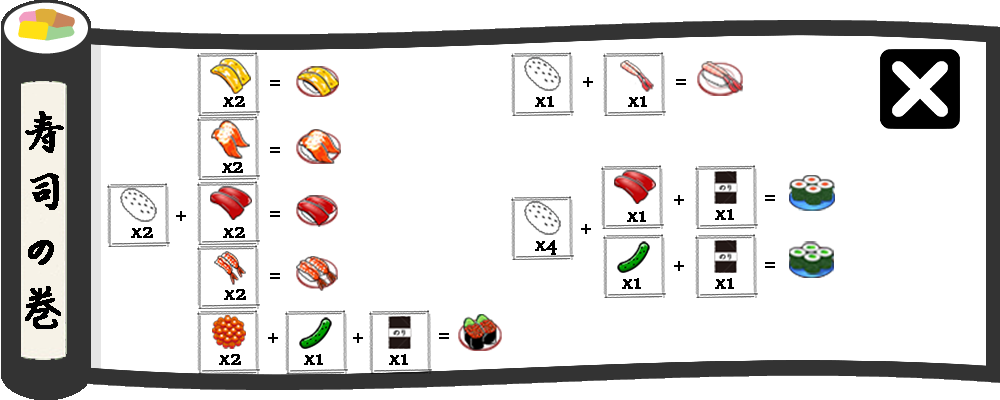
<style>
.page{position:relative;width:1000px;height:400px;background:#ffffff}
.page>*{position:absolute;margin:0}
.t1{font:21.8px "SitkaBanner";color:#000000;font-weight:bold}
.t2{font:48.6px/29.2px "HanziPenSC-W5";color:#000000;font-weight:bold}
</style>
<div class="page">
<p class="t1" style="left:583px;top:77px;width:10px;height:10px">+</p>
<p class="t1" style="left:270px;top:80px;width:10px;height:6px">=</p>
<p class="t1" style="left:676px;top:79px;width:10px;height:6px">=</p>
<p class="t1" style="left:223px;top:96px;width:22px;height:11px">x2</p>
<p class="t1" style="left:535px;top:96px;width:19px;height:11px">x1</p>
<p class="t1" style="left:628px;top:96px;width:19px;height:11px">x1</p>
<p class="t2" style="left:25px;top:111px;width:39px;height:218px">寿<br><br>司<br><br>の<br><br>巻</p>
<p class="t1" style="left:270px;top:147px;width:10px;height:6px">=</p>
<p class="t1" style="left:222px;top:162px;width:21px;height:11px">x2</p>
<p class="t1" style="left:674px;top:195px;width:10px;height:10px">+</p>
<p class="t1" style="left:765px;top:195px;width:10px;height:6px">=</p>
<p class="t1" style="left:715px;top:209px;width:19px;height:11px">x1</p>
<p class="t1" style="left:176px;top:211px;width:10px;height:10px">+</p>
<p class="t1" style="left:270px;top:211px;width:10px;height:6px">=</p>
<p class="t1" style="left:627px;top:211px;width:19px;height:11px">x1</p>
<p class="t1" style="left:131px;top:227px;width:22px;height:11px">x2</p>
<p class="t1" style="left:223px;top:227px;width:22px;height:11px">x2</p>
<p class="t1" style="left:581px;top:224px;width:10px;height:10px">+</p>
<p class="t1" style="left:535px;top:240px;width:22px;height:15px">x4</p>
<p class="t1" style="left:674px;top:261px;width:10px;height:10px">+</p>
<p class="t1" style="left:765px;top:262px;width:10px;height:6px">=</p>
<p class="t1" style="left:270px;top:273px;width:10px;height:6px">=</p>
<p class="t1" style="left:622px;top:278px;width:19px;height:11px">x1</p>
<p class="t1" style="left:715px;top:278px;width:19px;height:11px">x1</p>
<p class="t1" style="left:224px;top:289px;width:22px;height:11px">x2</p>
<p class="t1" style="left:268px;top:333px;width:10px;height:10px">+</p>
<p class="t1" style="left:353px;top:333px;width:10px;height:10px">+</p>
<p class="t1" style="left:439px;top:333px;width:10px;height:6px">=</p>
<p class="t1" style="left:219px;top:354px;width:22px;height:11px">x2</p>
<p class="t1" style="left:304px;top:354px;width:19px;height:11px">x1</p>
<p class="t1" style="left:389px;top:354px;width:19px;height:11px">x1</p>
</div>
